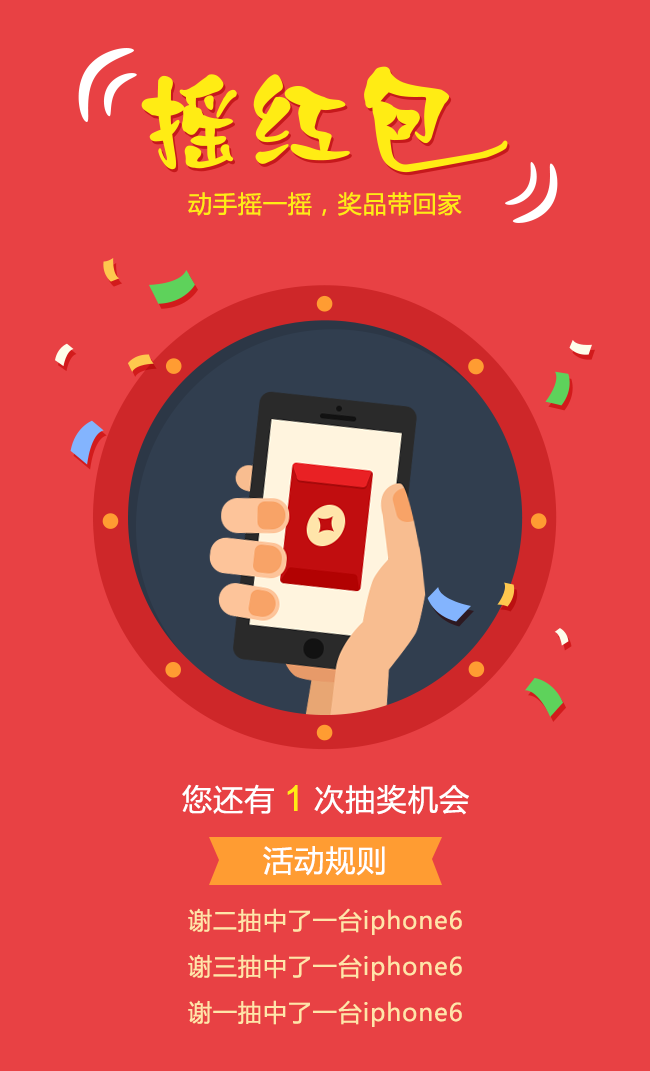
<style>
.page{position:relative;width:650px;height:1071px;background:#e84144}
.page>*{position:absolute;margin:0}
.t1{font:24px "MicrosoftYaHei";letter-spacing:0.04em;color:#ffec14}
.t2{font:30px "MicrosoftYaHei";letter-spacing:0.04em;color:#ffffff}
.t3{font:36px "ArialMT";letter-spacing:0.04em;color:#ffec14}
.t4{font:24px/23px "MicrosoftYaHei";letter-spacing:0.04em;color:#ffe5aa}
</style>
<div class="page">
<p class="t1" style="left:188px;top:191px;width:274px;height:25px">动手摇一摇，奖品带回家</p>
<p class="t2" style="left:182px;top:784px;width:287px;height:31px">您还有    次抽奖机会</p>
<p class="t3" style="left:287px;top:785px;width:11px;height:26px">1</p>
<p class="t2" style="left:263px;top:846px;width:122px;height:30px">活动规则</p>
<p class="t4" style="left:188px;top:908px;width:274px;height:119px;text-align:justify">谢二抽中了一台iphone6<br><br>谢三抽中了一台iphone6<br><br>谢一抽中了一台iphone6</p>
</div>
